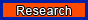
<style>
.page{position:relative;width:88px;height:20px;background:#ff4a00}
.page>*{position:absolute;margin:0}
.t1{font:12px "ArialMT";letter-spacing:0.05em;color:#ffffff}
</style>
<div class="page">
<p class="t1" style="left:17px;top:6px;width:54px;height:9px">Research</p>
</div>
